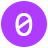
<style>
.page{position:relative;width:48px;height:48px;background:#af3bff}
.page>*{position:absolute;margin:0}
.t1{font:36px "Consolas";color:#fffefe}
</style>
<div class="page">
<p class="t1" style="left:15px;top:13px;width:18px;height:23px">0</p>
</div>
